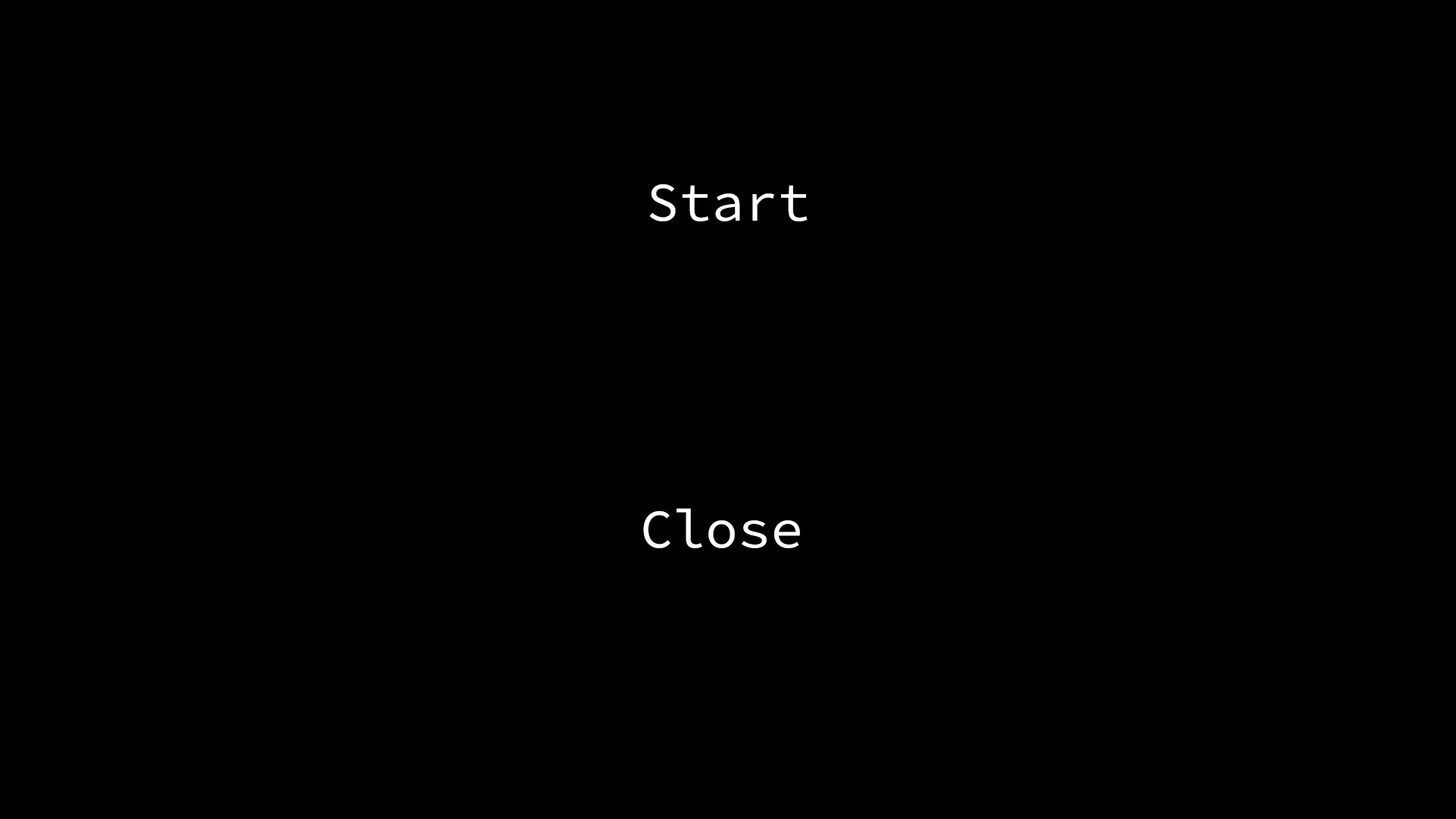
<style>
.page{position:relative;width:1456px;height:819px;background:#000000}
.page>*{position:absolute;margin:0}
.t1{font:54.6px "SourceCodeVariable-Roman";color:#ffffff}
</style>
<div class="page">
<p class="t1" style="left:649px;top:184px;width:159px;height:37px">Start</p>
<p class="t1" style="left:643px;top:508px;width:157px;height:40px">Close</p>
</div>
